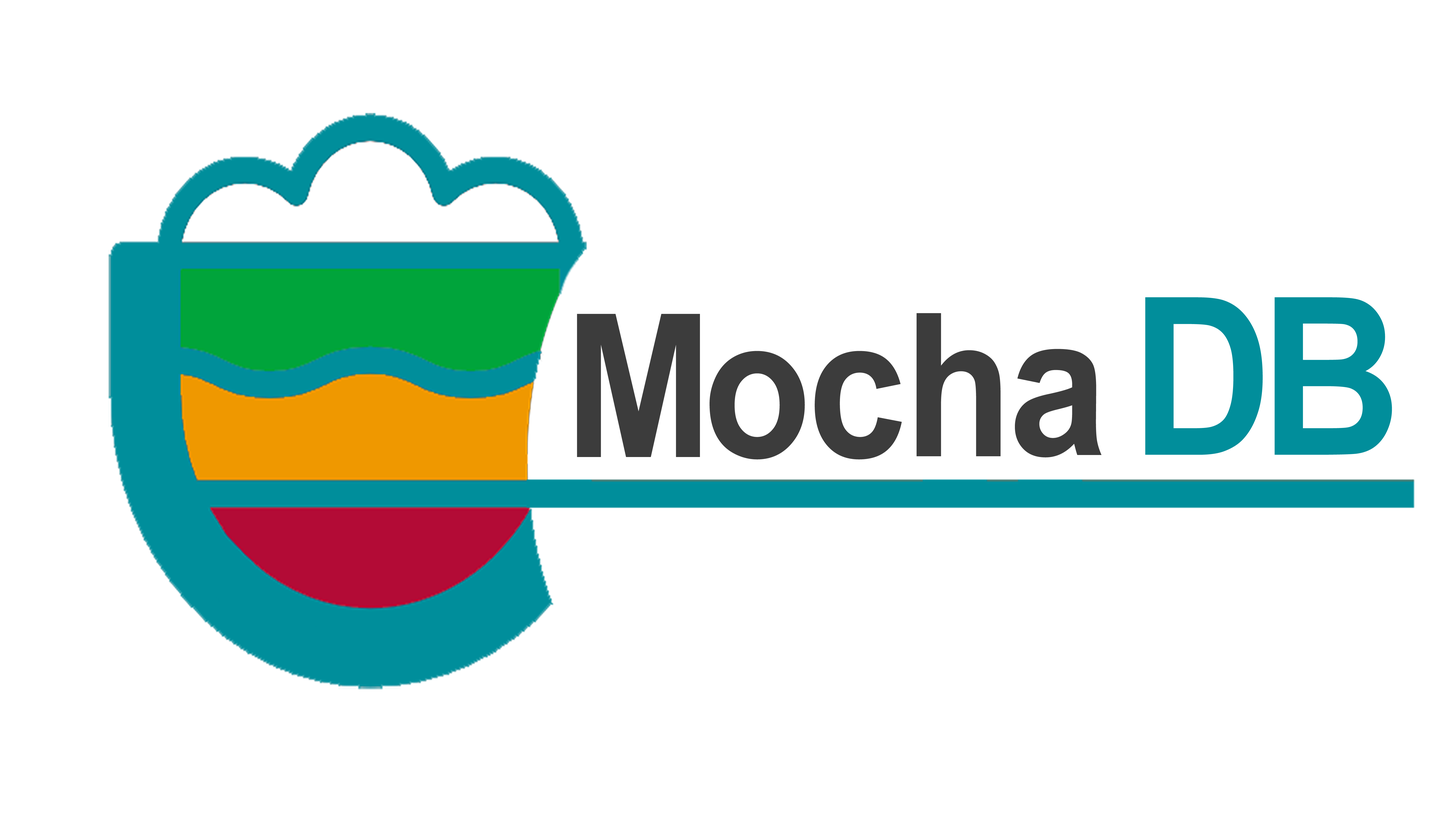
<style>
.page{position:relative;width:1456px;height:819px;background:#ffffff}
.page>*{position:absolute;margin:0}
.t1{font:219.9px "Arial-BoldMT";color:#018e9b;scale:0.89 1}
.t2{font:199.9px "Arial-BoldMT";color:#3c3c3c;scale:0.89 1}
</style>
<div class="page">
<p class="t1" style="left:1145px;top:297px;width:118px;height:158px">D</p>
<p class="t1" style="left:1274px;top:297px;width:118px;height:158px">B</p>
<p class="t2" style="left:577px;top:314px;width:123px;height:143px">M</p>
<p class="t2" style="left:917px;top:313px;width:84px;height:143px">h</p>
<p class="t2" style="left:710px;top:351px;width:95px;height:109px">o</p>
<p class="t2" style="left:815px;top:351px;width:87px;height:109px">c</p>
<p class="t2" style="left:1015px;top:349px;width:87px;height:109px">a</p>
</div>
